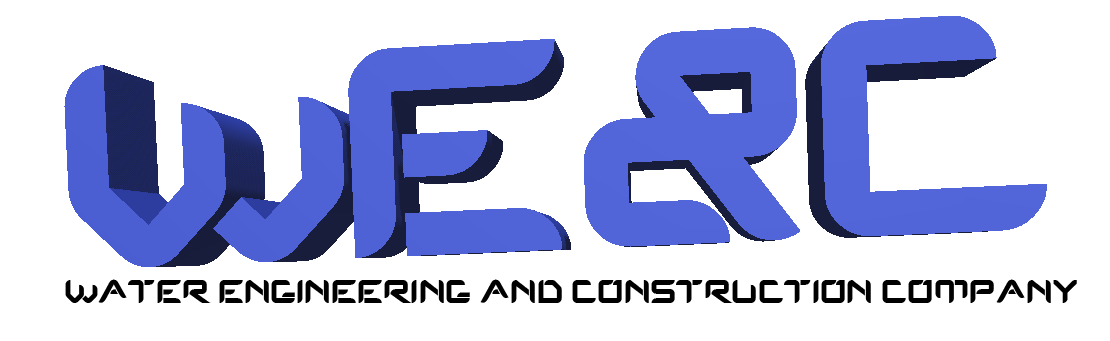
<style>
.page{position:relative;width:1110px;height:341px;background:#ffffff}
.page>*{position:absolute;margin:0}
.t1{font:33.3px "Protos";color:#000000}
</style>
<div class="page">
<p class="t1" style="left:65px;top:279px;width:1012px;height:24px">water engineering and construction company</p>
</div>
